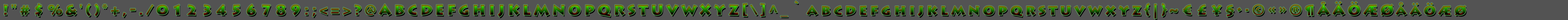
<style>
.page{position:relative;width:1568px;height:20px;background:#535353}
.page>*{position:absolute;margin:0}
.t1{font:14.5px "LithosPro-Black";letter-spacing:0.2em}
</style>
<div class="page">
<p class="t1" style="left:4px;top:1px;width:1462px;height:17px">!"#$%&amp;'()*+,-./0123456789:;&lt;=&gt;?@ABCDEFGHIJKLMNOPQRSTUVWXYZ[\]^_`abcdefghijklmnopqrstuvwxyz{|}~€£¥§•·©«»®¶ÅÄÖÆØåäöæø</p>
</div>
